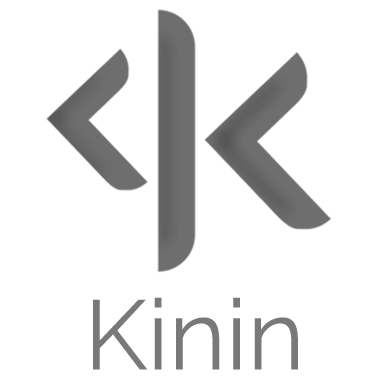
<style>
.page{position:relative;width:390px;height:390px;background:#ffffff}
.page>*{position:absolute;margin:0}
.t1{font:98.3px "Raleway-Regular";color:#797979}
</style>
<div class="page">
<p class="t1" style="left:93px;top:297px;width:205px;height:73px">Kinin</p>
</div>
